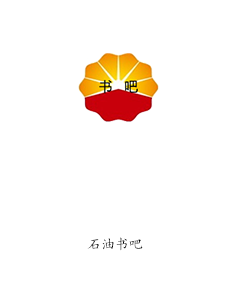
<style>
.page{position:relative;width:240px;height:282px;background:#ffffff}
.page>*{position:absolute;margin:0}
.t1{font:14px "¿¬Ìå";color:#000000}
</style>
<div class="page">
<p class="t1" style="left:87px;top:237px;width:56px;height:14px">石油书吧</p>
</div>
